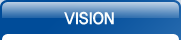
<style>
.page{position:relative;width:181px;height:40px}
.page>*{position:absolute;margin:0}
.t1{font:16px "YDIYGO350";letter-spacing:-0.025em;color:#fafdfd;scale:0.95 1}
</style>
<div class="page">
<p class="t1" style="left:64px;top:11px;width:50px;height:14px">VISION</p>
</div>
